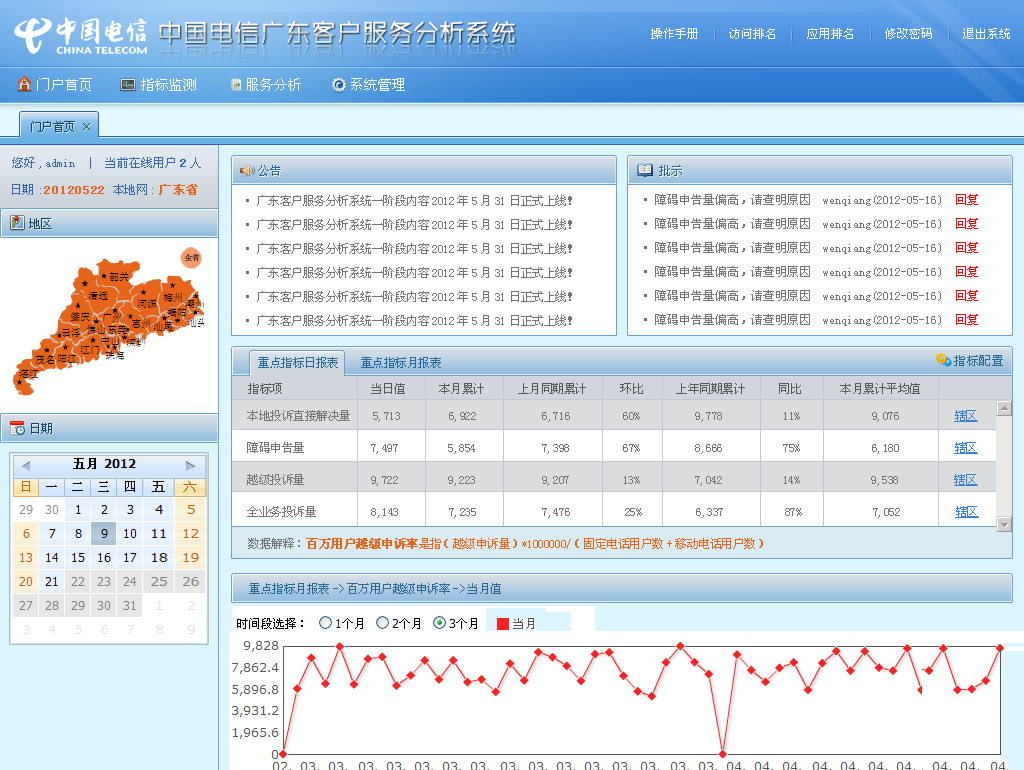
<style>
.page{position:relative;width:1024px;height:770px;background:#ffffff}
.page>*{position:absolute;margin:0}
.t1{font:25.2px "ZHSRXT--GBK1-0";font-weight:bold}
.t2{font:12px "SimSun";color:#ffffff}
.t3{font:14px "SimSun";color:#fefefe}
.t4{font:12px "SimSun";letter-spacing:-0.04em;color:#134565}
.t5{font:12px "SimSun";color:#3668ac}
.t6{font:12px "SimSun";color:#3668ac;font-weight:bold}
.t7{font:12px "SimSun";letter-spacing:-0.04em;color:#276896}
.t8{font:12px "SimSun";letter-spacing:0.06em;color:#e86418;font-weight:bold}
.t9{font:12px "SimSun";letter-spacing:0.04em;color:#3668ac}
.t10{font:12px "SimSun";letter-spacing:-0.04em;color:#3668ac}
.t11{font:12px/24px "SimSun";letter-spacing:-0.04em;color:#737576}
.t12{font:12px/24px "SimSun";color:#737576}
.t13{font:12px/24px "SimSun";color:#ff0000}
.t14{font:12px "SimSun";letter-spacing:0.06em;color:#276896}
.t15{font:12px "SimSun";letter-spacing:-0.04em;color:#57595b}
.t16{font:12px/32px "SimSun";letter-spacing:-0.04em;color:#737576}
.t17{font:12px/32px "SimSun";letter-spacing:-0.04em;color:#3882d6;text-decoration:underline}
.t18{font:12px "SimSun";letter-spacing:-0.04em;color:#737576}
.t19{font:12px "SimSun";letter-spacing:-0.04em;color:#e86418}
.t20{font:12px "SimSun";letter-spacing:-0.04em;color:#e86418;font-weight:bold}
</style>
<div class="page">
<p class="t1" style="left:159px;top:21px;width:356px;height:23px">中国电信广东客户服务分析系统</p>
<p class="t2" style="left:651px;top:28px;width:359px;height:11px">操作手册     访问排名     应用排名     修改密码     退出系统</p>
<p class="t3" style="left:37px;top:78px;width:368px;height:13px">门户首页       指标监测       服务分析       系统管理</p>
<p class="t4" style="left:31px;top:121px;width:44px;height:11px">门户首页</p>
<p class="t4" style="left:83px;top:123px;width:7px;height:7px">×</p>
<p class="t5" style="left:12px;top:157px;width:189px;height:12px">您好,admin  |  当前在线用户<span class="t6">2</span>人</p>
<p class="t7" style="left:258px;top:165px;width:23px;height:11px">公告</p>
<p class="t7" style="left:659px;top:165px;width:23px;height:11px">批示</p>
<p class="t8" style="left:12px;top:184px;width:186px;height:11px"><span class="t9">日期:</span>20120522 <span class="t10">本地网:</span>广东省</p>
<p class="t11" style="left:246px;top:195px;width:326px;height:131px">·广东客户服务分析系统一阶段内容2012年5月31日正式上线！<br>·广东客户服务分析系统一阶段内容2012年5月31日正式上线！<br>·广东客户服务分析系统一阶段内容2012年5月31日正式上线！<br>·广东客户服务分析系统一阶段内容2012年5月31日正式上线！<br>·广东客户服务分析系统一阶段内容2012年5月31日正式上线！<br>·广东客户服务分析系统一阶段内容2012年5月31日正式上线！</p>
<p class="t12" style="left:644px;top:194px;width:334px;height:132px">·障碍申告量偏高，请查明原因  wenqiang(2012-05-16) <span class="t13"> 回复<br></span>·障碍申告量偏高，请查明原因  wenqiang(2012-05-16) <span class="t13"> 回复<br></span>·障碍申告量偏高，请查明原因  wenqiang(2012-05-16) <span class="t13"> 回复<br></span>·障碍申告量偏高，请查明原因  wenqiang(2012-05-16) <span class="t13"> 回复<br></span>·障碍申告量偏高，请查明原因  wenqiang(2012-05-16) <span class="t13"> 回复<br></span>·障碍申告量偏高，请查明原因  wenqiang(2012-05-16) <span class="t13"> 回复</span></p>
<p class="t4" style="left:29px;top:218px;width:23px;height:11px">地区</p>
<p class="t7" style="left:258px;top:357px;width:183px;height:11px">重点指标日报表    重点指标月报表</p>
<p class="t14" style="left:954px;top:355px;width:49px;height:11px">指标配置</p>
<p class="t15" style="left:248px;top:383px;width:672px;height:11px">指标项                当日值      本月累计      上月同期累计      环比      上年同期累计      同比       本月累计平均值</p>
<p class="t16" style="left:247px;top:410px;width:732px;height:108px">本地投诉直接解决量    5,713         6,922            6,716         60%          9,778           11%             9,076          <span class="t17">辖区</span> <br>障碍申告量            7,497         5,854            7,398          67%          8,666           75%             6,180          <span class="t17">辖区<br></span>越级投诉量            9,722         9,223            9,207          13%          7,042           14%             9,538          <span class="t17">辖区<br></span>全业务投诉量          8,143         7,235            7,476          25%          6,337           87%             7,052          <span class="t17">辖区</span></p>
<p class="t4" style="left:31px;top:423px;width:21px;height:11px">日期</p>
<p class="t18" style="left:248px;top:538px;width:52px;height:11px">数据解释：</p>
<p class="t19" style="left:306px;top:538px;width:457px;height:11px"><span class="t20">百万用户越级申诉率</span>是指 （越级申诉量）*1000000/（固定电话用户数+移动电话用户数）</p>
<p class="t7" style="left:249px;top:583px;width:252px;height:11px">重点指标月报表-&gt;百万用户越级申诉率-&gt;当月值</p>
</div>
